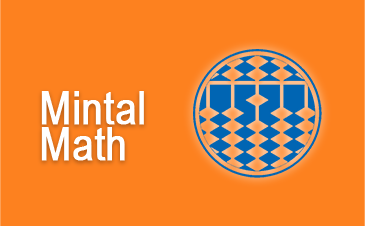
<style>
.page{position:relative;width:365px;height:226px;background:#fd811f}
.page>*{position:absolute;margin:0}
.t1{font:45.6px/36px "ArialNarrow";color:#ffffff;font-weight:bold}
</style>
<div class="page">
<p class="t1" style="left:41px;top:91px;width:103px;height:70px">Mintal<br>Math</p>
</div>
